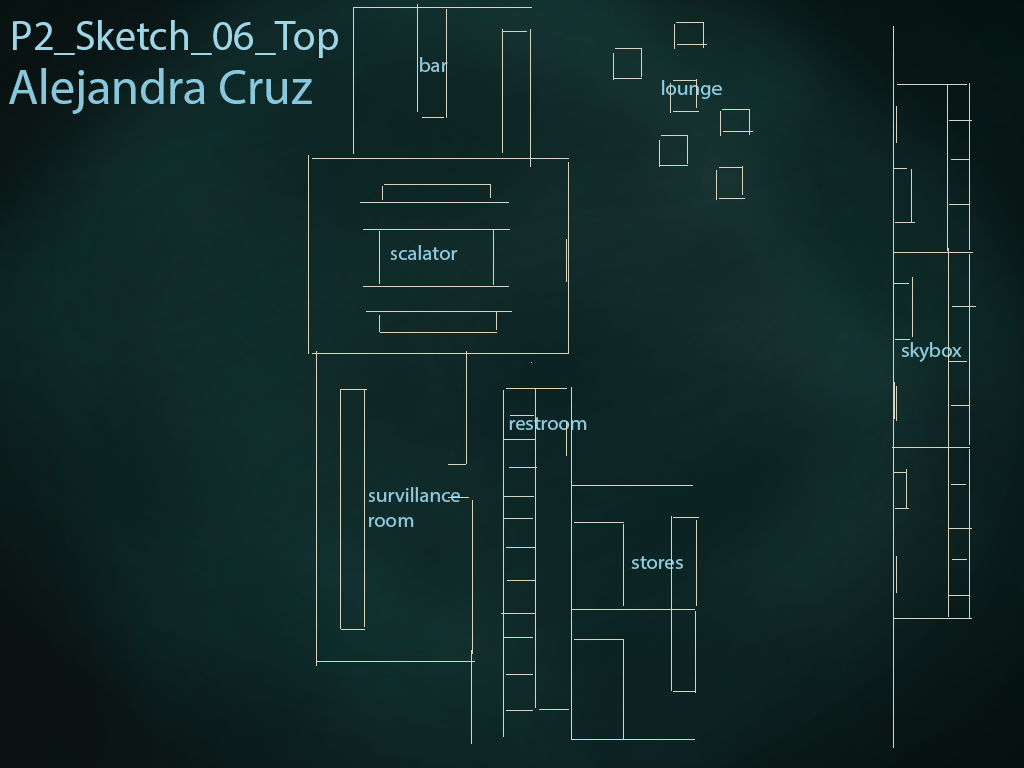
<style>
.page{position:relative;width:1024px;height:768px}
.page>*{position:absolute;margin:0}
.t1{font:41.7px "MyriadPro-Regular";color:#9ed6e8}
.t2{font:20.8px "MyriadPro-Regular";color:#90cce0}
.t3{font:12px "MyriadPro-Regular";color:#89c8dc}
</style>
<div class="page">
<p class="t1" style="left:13px;top:20px;width:325px;height:38px">P2_Sketch_06_Top</p>
<p class="t2" style="left:420px;top:57px;width:28px;height:15px">bar</p>
<p class="t3" style="left:9px;top:68px;width:303px;height:46px">Alejandra Cruz</p>
<p class="t2" style="left:662px;top:80px;width:60px;height:19px">lounge</p>
<p class="t2" style="left:390px;top:245px;width:68px;height:15px">scalator</p>
<p class="t2" style="left:901px;top:342px;width:61px;height:20px">skybox</p>
<p class="t2" style="left:509px;top:417px;width:78px;height:13px">restroom</p>
<p class="t2" style="left:368px;top:487px;width:92px;height:40px">survillance<br>room</p>
<p class="t2" style="left:631px;top:556px;width:52px;height:13px">stores</p>
</div>
